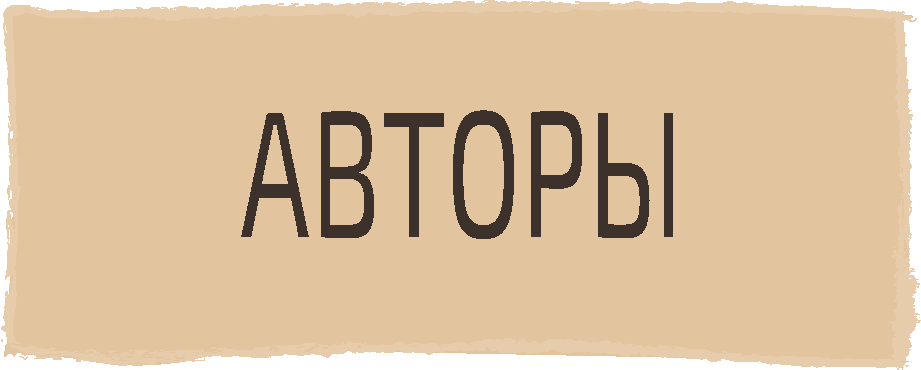
<style>
.page{position:relative;width:921px;height:370px;background:#e2c59f}
.page>*{position:absolute;margin:0}
.t1{font:180.2px "Exo2-Regular";color:#3d312b;text-transform:uppercase;scale:0.62 1}
</style>
<div class="page">
<p class="t1" style="left:241px;top:110px;width:432px;height:129px">Авторы</p>
</div>
